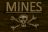
<style>
.page{position:relative;width:48px;height:32px}
.page>*{position:absolute;margin:0}
.t1{font:14.1px "Calibri-Light";color:#776641;font-weight:bold;scale:0.93 1}
</style>
<div class="page">
<p class="t1" style="left:6px;top:2px;width:36px;height:10px">MINES</p>
</div>
